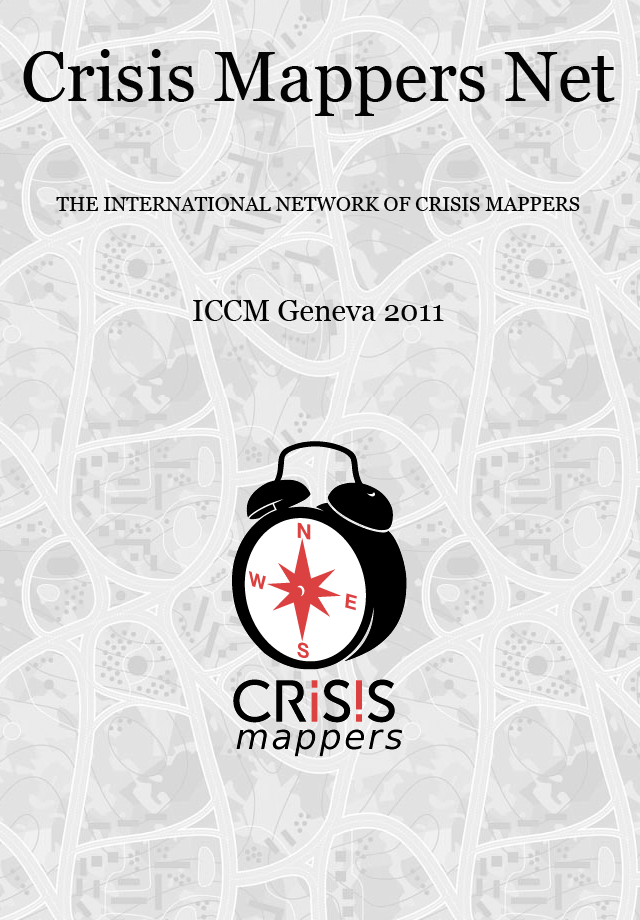
<style>
.page{position:relative;width:640px;height:920px}
.page>*{position:absolute;margin:0}
.t1{font:20px/22px "Georgia";letter-spacing:0.001em;color:#030303}
.t2{font:70px/22px "Georgia";letter-spacing:0.001em;color:#030303}
.t3{font:30px/22px "Georgia";letter-spacing:0.001em;color:#030303}
</style>
<div class="page">
<p class="t1" style="left:23px;top:49px;width:592px;height:272px;text-align:center"><span class="t2">Crisis Mappers Net<br><br><br><br><br></span>THE INTERNATIONAL NETWORK OF CRISIS MAPPERS<br><span class="t3"><br><br><br><br>ICCM Geneva 2011</span></p>
</div>
